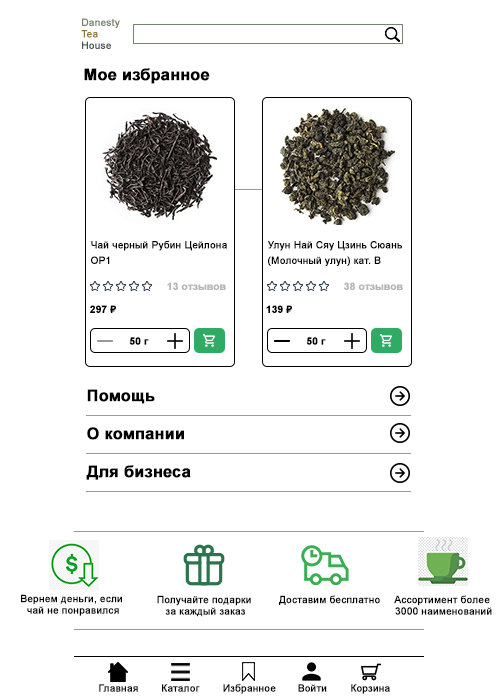
<style>
.page{position:relative;width:500px;height:700px;background:#ffffff}
.page>*{position:absolute;margin:0}
.t1{font:10px/3.8px "ArialMT";color:#76856e;font-weight:bold}
.t2{font:10px/3.8px "ArialMT";color:#8e7734;font-weight:bold}
.t3{font:10px/3.8px "ArialMT";color:#4a5656;font-weight:bold}
.t4{font:16px "Arial-BoldMT";color:#000000;font-weight:bold}
.t5{font:10px/3.8px "ArialMT";color:#000000;font-weight:bold}
.t6{font:10px "Arial-BoldMT";color:#b6b6b6;font-weight:bold}
.t7{font:10px "Arial-BoldMT";color:#000000;font-weight:bold}
.t8{font:10px "ArialMT";color:#000000;font-weight:bold}
</style>
<div class="page">
<p class="t1" style="left:81px;top:18px;width:39px;height:31px">Danesty <br><br><br><span class="t2">Tea <br><br><br></span><span class="t3">House</span></p>
<p class="t4" style="left:84px;top:68px;width:126px;height:16px">Мое избранное</p>
<p class="t5" style="left:91px;top:240px;width:136px;height:24px">Чай черный Рубин Цейлона <br><br><br><br>OP1</p>
<p class="t5" style="left:268px;top:241px;width:134px;height:25px">Улун Най Сяу Цзинь Сюань<br><br><br><br>(Молочный улун) кат. B</p>
<p class="t6" style="left:167px;top:282px;width:59px;height:8px">13 отзывов</p>
<p class="t6" style="left:344px;top:282px;width:59px;height:8px">38 отзывов</p>
<p class="t7" style="left:90px;top:305px;width:26px;height:8px">297 ₽</p>
<p class="t7" style="left:266px;top:305px;width:26px;height:8px">139 ₽</p>
<p class="t7" style="left:129px;top:337px;width:20px;height:8px">50 г</p>
<p class="t7" style="left:306px;top:337px;width:20px;height:8px">50 г</p>
<p class="t4" style="left:87px;top:389px;width:68px;height:15px">Помощь</p>
<p class="t4" style="left:87px;top:427px;width:97px;height:13px">О компании</p>
<p class="t4" style="left:86px;top:465px;width:105px;height:15px">Для бизнеса</p>
<p class="t5" style="left:21px;top:594px;width:101px;height:22px;text-align:center">Вернем деньги, если<br><br><br> чай не понравился</p>
<p class="t5" style="left:157px;top:595px;width:94px;height:22px;text-align:center">Получайте подарки <br><br><br>за каждый заказ</p>
<p class="t8" style="left:279px;top:595px;width:101px;height:10px">Доставим бесплатно</p>
<p class="t5" style="left:394px;top:595px;width:98px;height:20px;text-align:center">Ассортимент более <br><br><br>3000 наименований</p>
<p class="t8" style="left:99px;top:684px;width:39px;height:8px">Главная</p>
<p class="t8" style="left:162px;top:684px;width:38px;height:8px">Каталог</p>
<p class="t8" style="left:223px;top:684px;width:53px;height:10px">Избранное</p>
<p class="t8" style="left:298px;top:684px;width:29px;height:8px">Войти</p>
<p class="t8" style="left:351px;top:684px;width:39px;height:10px">Корзина</p>
</div>
